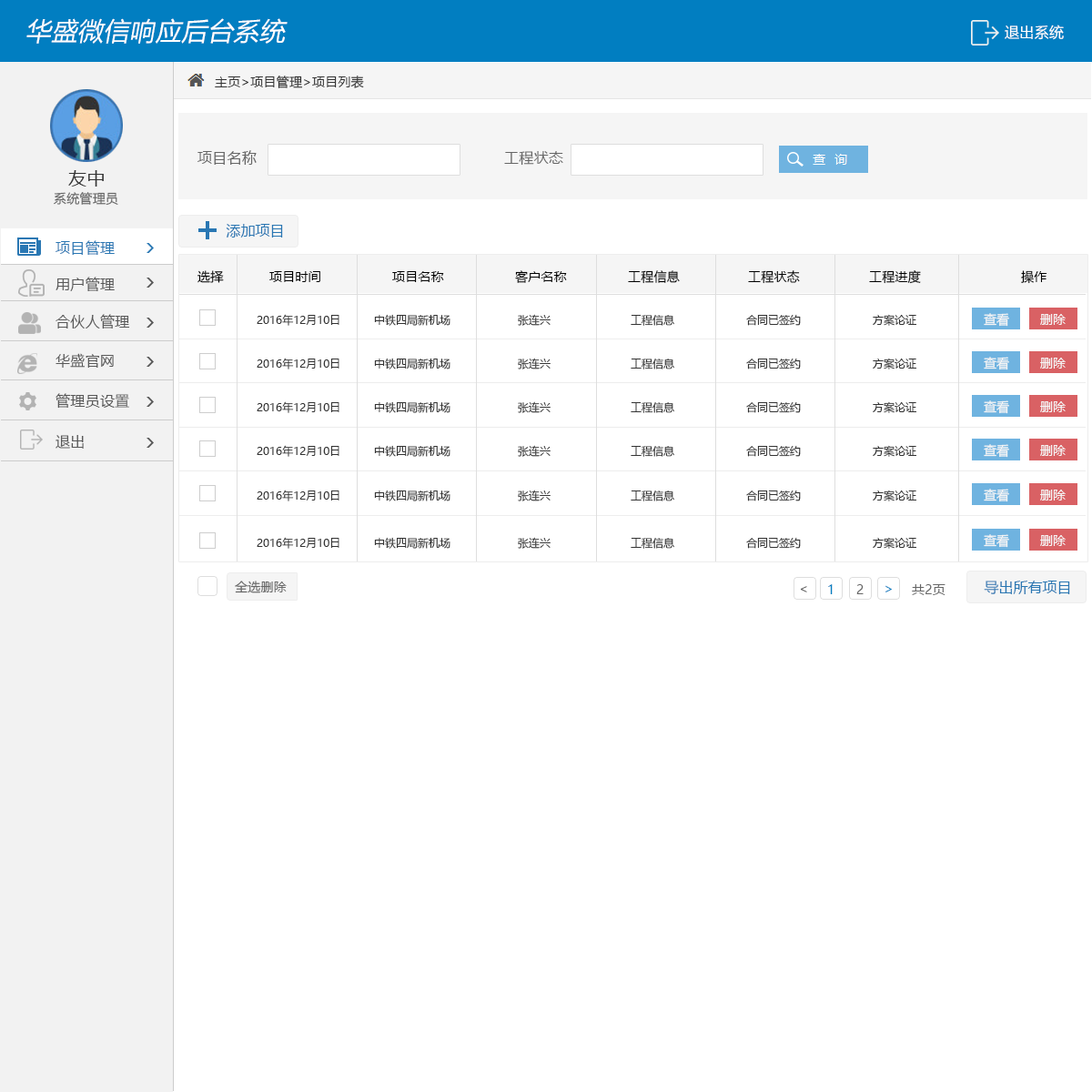
<style>
.page{position:relative;width:1092px;height:1092px;background:#ffffff}
.page>*{position:absolute;margin:0}
.t1{font:25.5px "MicrosoftYaHei";letter-spacing:0.02em;color:#ffffff;font-style:italic}
.t2{font:14.6px "MicrosoftYaHei";letter-spacing:0.02em;color:#ffffff}
.t3{font:12.7px "MicrosoftYaHei";letter-spacing:0.02em;color:#333333}
.t4{font:14.6px "MicrosoftYaHei";letter-spacing:0.02em;color:#666666}
.t5{font:18.2px "MicrosoftYaHei";letter-spacing:0.02em;color:#333333}
.t6{font:12.7px "MicrosoftYaHei";letter-spacing:0.02em;color:#666666}
.t7{font:14.6px "MicrosoftYaHei";color:#2977b3}
.t8{font:14.6px "MicrosoftYaHei";letter-spacing:0.02em;color:#2977b3}
.t9{font:14.6px "MicrosoftYaHei";letter-spacing:0.02em;color:#585858}
.t10{font:12.7px "MicrosoftYaHei";letter-spacing:0.02em;color:#000000}
.t11{font:10.9px "MicrosoftYaHei";color:#333333}
.t12{font:12.7px "MicrosoftYaHei";color:#f5f5f5}
.t13{font:12.7px "MicrosoftYaHei";letter-spacing:0.02em;color:#017ec1}
.t14{font:13.1px "MicrosoftYaHei";letter-spacing:0.02em;color:#017ec1}
</style>
<div class="page">
<p class="t1" style="left:26px;top:18px;width:262px;height:26px">华盛微信响应后台系统</p>
<p class="t2" style="left:1005px;top:25px;width:59px;height:15px">退出系统</p>
<p class="t3" style="left:215px;top:76px;width:149px;height:12px">主页&gt;项目管理&gt;项目列表</p>
<p class="t4" style="left:197px;top:150px;width:60px;height:15px">项目名称</p>
<p class="t4" style="left:504px;top:151px;width:59px;height:15px">工程状态</p>
<p class="t5" style="left:68px;top:170px;width:36px;height:17px">友中</p>
<p class="t6" style="left:54px;top:192px;width:64px;height:14px">系统管理员</p>
<p class="t7" style="left:226px;top:224px;width:57px;height:14px">添加项目</p>
<p class="t8" style="left:56px;top:240px;width:59px;height:15px">项目管理</p>
<p class="t9" style="left:56px;top:277px;width:59px;height:14px">用户管理</p>
<p class="t10" style="left:197px;top:270px;width:27px;height:13px">选择</p>
<p class="t10" style="left:269px;top:271px;width:51px;height:11px">项目时间</p>
<p class="t10" style="left:392px;top:271px;width:52px;height:11px">项目名称</p>
<p class="t10" style="left:515px;top:270px;width:52px;height:13px">客户名称</p>
<p class="t10" style="left:628px;top:270px;width:52px;height:14px">工程信息</p>
<p class="t10" style="left:748px;top:270px;width:52px;height:14px">工程状态</p>
<p class="t10" style="left:869px;top:270px;width:52px;height:14px">工程进度</p>
<p class="t10" style="left:1021px;top:270px;width:26px;height:14px">操作</p>
<p class="t9" style="left:56px;top:314px;width:74px;height:15px">合伙人管理</p>
<p class="t11" style="left:257px;top:314px;width:82px;height:12px">2016年12月10日</p>
<p class="t11" style="left:374px;top:314px;width:76px;height:12px">中铁四局新机场</p>
<p class="t11" style="left:518px;top:314px;width:33px;height:12px">张连兴</p>
<p class="t11" style="left:631px;top:315px;width:43px;height:11px">工程信息</p>
<p class="t11" style="left:746px;top:314px;width:55px;height:12px">合同已签约</p>
<p class="t11" style="left:873px;top:314px;width:43px;height:12px">方案论证</p>
<p class="t12" style="left:984px;top:313px;width:25px;height:14px">查看</p>
<p class="t12" style="left:1040px;top:314px;width:26px;height:11px">删除</p>
<p class="t9" style="left:56px;top:353px;width:58px;height:15px">华盛官网</p>
<p class="t11" style="left:257px;top:358px;width:82px;height:11px">2016年12月10日</p>
<p class="t11" style="left:374px;top:358px;width:76px;height:11px">中铁四局新机场</p>
<p class="t11" style="left:518px;top:358px;width:33px;height:11px">张连兴</p>
<p class="t11" style="left:631px;top:359px;width:43px;height:10px">工程信息</p>
<p class="t11" style="left:746px;top:358px;width:55px;height:11px">合同已签约</p>
<p class="t11" style="left:873px;top:358px;width:43px;height:11px">方案论证</p>
<p class="t12" style="left:984px;top:357px;width:25px;height:13px">查看</p>
<p class="t12" style="left:1040px;top:358px;width:26px;height:11px">删除</p>
<p class="t9" style="left:56px;top:393px;width:73px;height:16px">管理员设置</p>
<p class="t11" style="left:257px;top:401px;width:82px;height:12px">2016年12月10日</p>
<p class="t11" style="left:374px;top:401px;width:76px;height:12px">中铁四局新机场</p>
<p class="t11" style="left:518px;top:401px;width:33px;height:12px">张连兴</p>
<p class="t11" style="left:746px;top:401px;width:55px;height:12px">合同已签约</p>
<p class="t11" style="left:873px;top:401px;width:43px;height:12px">方案论证</p>
<p class="t12" style="left:984px;top:400px;width:25px;height:14px">查看</p>
<p class="t12" style="left:1040px;top:401px;width:26px;height:11px">删除</p>
<p class="t11" style="left:631px;top:402px;width:43px;height:11px">工程信息</p>
<p class="t9" style="left:56px;top:435px;width:28px;height:14px">退出</p>
<p class="t11" style="left:257px;top:445px;width:82px;height:12px">2016年12月10日</p>
<p class="t11" style="left:374px;top:445px;width:76px;height:12px">中铁四局新机场</p>
<p class="t11" style="left:518px;top:445px;width:33px;height:12px">张连兴</p>
<p class="t11" style="left:631px;top:446px;width:43px;height:11px">工程信息</p>
<p class="t11" style="left:746px;top:445px;width:55px;height:12px">合同已签约</p>
<p class="t11" style="left:873px;top:445px;width:43px;height:12px">方案论证</p>
<p class="t12" style="left:984px;top:444px;width:25px;height:14px">查看</p>
<p class="t12" style="left:1040px;top:445px;width:26px;height:11px">删除</p>
<p class="t11" style="left:257px;top:490px;width:82px;height:11px">2016年12月10日</p>
<p class="t11" style="left:374px;top:490px;width:76px;height:11px">中铁四局新机场</p>
<p class="t11" style="left:518px;top:490px;width:33px;height:11px">张连兴</p>
<p class="t11" style="left:631px;top:490px;width:43px;height:11px">工程信息</p>
<p class="t11" style="left:746px;top:490px;width:55px;height:11px">合同已签约</p>
<p class="t11" style="left:873px;top:490px;width:43px;height:11px">方案论证</p>
<p class="t12" style="left:984px;top:489px;width:25px;height:13px">查看</p>
<p class="t12" style="left:1040px;top:490px;width:26px;height:10px">删除</p>
<p class="t11" style="left:257px;top:537px;width:82px;height:12px">2016年12月10日</p>
<p class="t11" style="left:374px;top:537px;width:76px;height:12px">中铁四局新机场</p>
<p class="t11" style="left:518px;top:537px;width:33px;height:12px">张连兴</p>
<p class="t11" style="left:631px;top:538px;width:43px;height:11px">工程信息</p>
<p class="t11" style="left:746px;top:537px;width:55px;height:12px">合同已签约</p>
<p class="t11" style="left:873px;top:537px;width:43px;height:12px">方案论证</p>
<p class="t12" style="left:984px;top:534px;width:25px;height:14px">查看</p>
<p class="t12" style="left:1040px;top:535px;width:26px;height:11px">删除</p>
<p class="t6" style="left:235px;top:581px;width:52px;height:12px">全选删除</p>
<p class="t7" style="left:984px;top:581px;width:86px;height:13px">导出所有项目</p>
<p class="t6" style="left:800px;top:586px;width:7px;height:6px">&lt;</p>
<p class="t13" style="left:828px;top:584px;width:5px;height:10px">1</p>
<p class="t6" style="left:856px;top:584px;width:8px;height:10px">2</p>
<p class="t14" style="left:885px;top:585px;width:7px;height:7px;rotate:180deg">&lt;</p>
<p class="t6" style="left:912px;top:584px;width:33px;height:11px">共2页</p>
</div>
